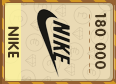
<style>
.page{position:relative;width:116px;height:84px;background:#eadab4}
.page>*{position:absolute;margin:0}
.t1{font:15px "RotondaC-Bold";letter-spacing:0.04em;color:#43341d;text-transform:uppercase}
</style>
<div class="page">
<p class="t1" style="left:95px;top:13px;width:11px;height:56px;rotate:90deg">180 000</p>
<p class="t1" style="left:8px;top:26px;width:11px;height:32px;rotate:90deg">Nike</p>
</div>
